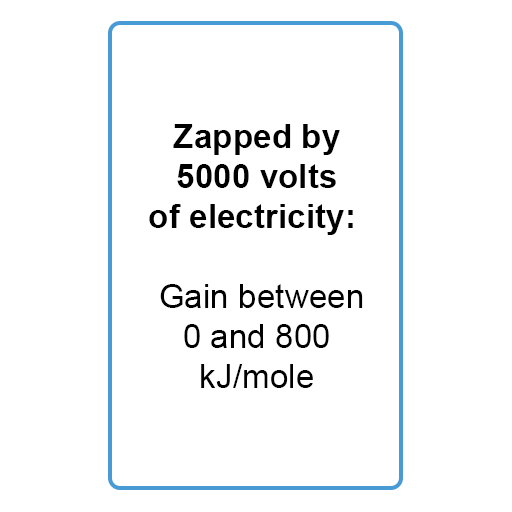
<style>
.page{position:relative;width:512px;height:512px;background:#ffffff}
.page>*{position:absolute;margin:0}
.t1{font:33.3px "Arial-BoldMT";color:#000000}
.t2{font:33.3px "ArialMT";color:#000000}
</style>
<div class="page">
<p class="t1" style="left:149px;top:124px;width:214px;height:264px;text-align:center">Zapped by<br>5000 volts<br>of electricity: <br><span class="t2"><br> Gain between<br>0 and 800<br>kJ/mole</span></p>
</div>
